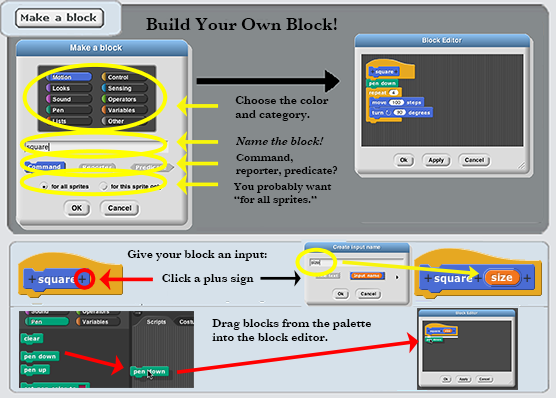
<style>
.page{position:relative;width:556px;height:398px;background:#858a8c}
.page>*{position:absolute;margin:0}
.t1{font:18px "Baskerville-SemiBold";color:#000000}
.t2{font:12px "Baskerville-SemiBold";color:#000000}
.t3{font:12px "Baskerville-SemiBoldItalic";color:#000000}
.t4{font:11px "Baskerville-SemiBold";color:#000000}
</style>
<div class="page">
<p class="t1" style="left:146px;top:18px;width:191px;height:12px">Build Your Own Block!</p>
<p class="t2" style="left:235px;top:96px;width:94px;height:25px">Choose the color<br>and category.</p>
<p class="t3" style="left:236px;top:137px;width:88px;height:8px">Name the block!</p>
<p class="t4" style="left:236px;top:154px;width:102px;height:23px">Command,<br>reporter, predicate?</p>
<p class="t4" style="left:233px;top:183px;width:99px;height:23px">You probably want<br>“for all sprites.”</p>
<p class="t2" style="left:127px;top:250px;width:140px;height:11px">Give your block an input:</p>
<p class="t2" style="left:162px;top:274px;width:92px;height:11px">Click a plus sign</p>
<p class="t2" style="left:212px;top:319px;width:159px;height:22px">Drag blocks from the palette<br>into the block editor.</p>
</div>
